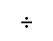
<style>
.page{position:relative;width:53px;height:41px;background:#ffffff}
.page>*{position:absolute;margin:0}
.t1{font:23.7px "DroidSans";color:#000000}
</style>
<div class="page">
<p class="t1" style="left:21px;top:17px;width:11px;height:11px">÷</p>
</div>
